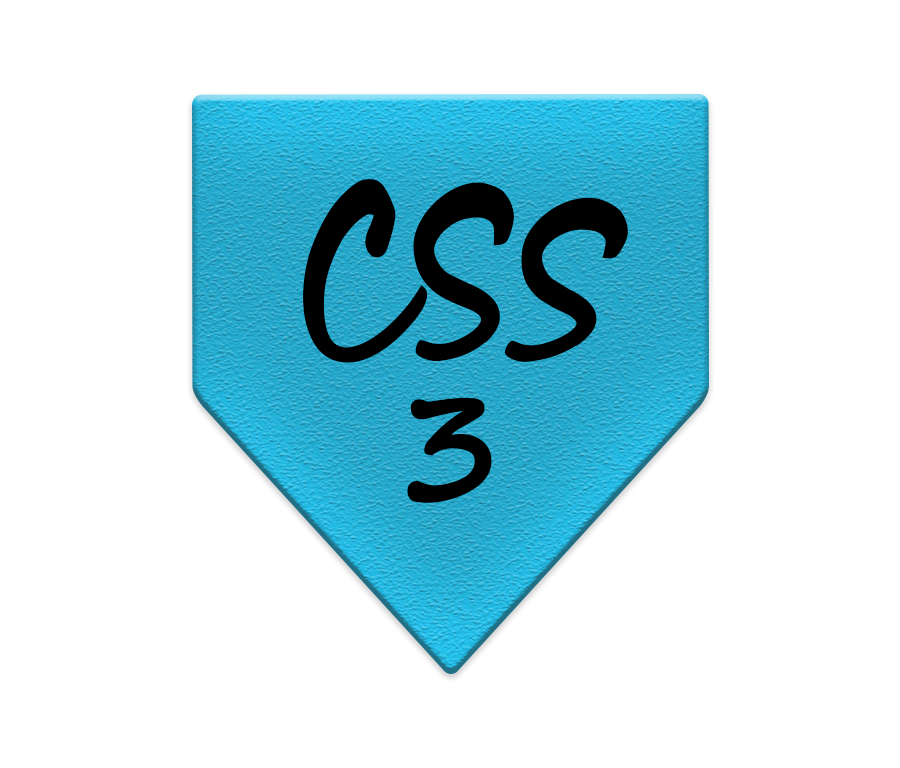
<style>
.page{position:relative;width:900px;height:768px;background:#ffffff}
.page>*{position:absolute;margin:0}
.t1{font:133.3px "SegoeScript-Bold";color:#000000}
</style>
<div class="page">
<p class="t1" style="left:303px;top:179px;width:325px;height:184px">CSS</p>
<p class="t1" style="left:407px;top:397px;width:85px;height:106px">3</p>
</div>
